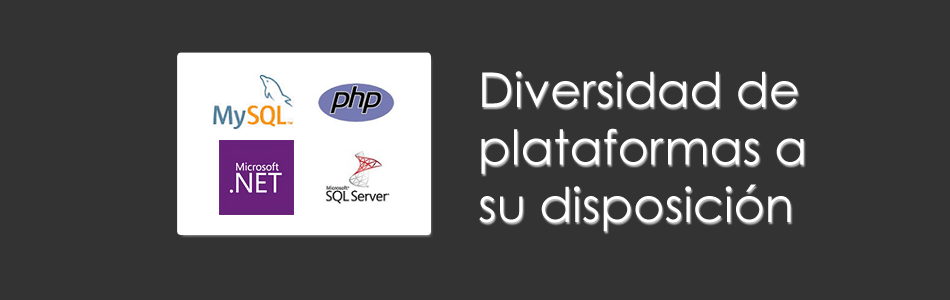
<style>
.page{position:relative;width:950px;height:300px;background:#333333}
.page>*{position:absolute;margin:0}
.t1{font:48px "CenturyGothic";color:#ffffff}
</style>
<div class="page">
<p class="t1" style="left:479px;top:71px;width:325px;height:161px">Diversidad de <br>plataformas a <br>su disposición</p>
</div>
